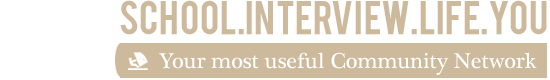
<style>
.page{position:relative;width:550px;height:80px;background:#ffffff}
.page>*{position:absolute;margin:0}
.t1{font:37px "Bebas";color:#cdb99c}
.t2{font:22px "PlantagenetCherokee";color:#ffffff}
</style>
<div class="page">
<p class="t1" style="left:120px;top:0px;width:427px;height:35px">SCHOOL.interview.LIFE.YOU</p>
<p class="t2" style="left:158px;top:52px;width:379px;height:23px">Your most useful Community Network</p>
</div>
